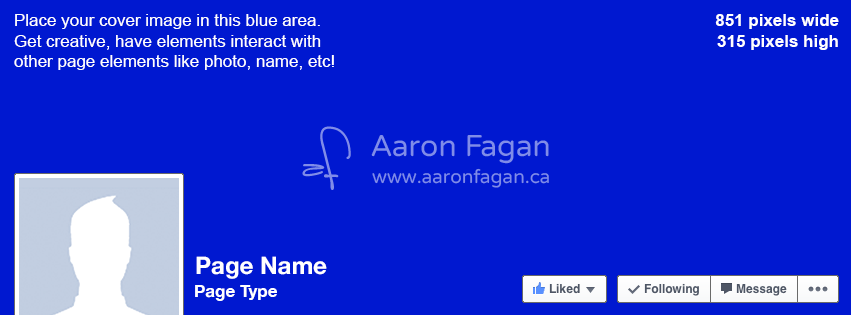
<style>
.page{position:relative;width:851px;height:315px;background:#0018d0}
.page>*{position:absolute;margin:0}
.t1{font:17px "ArialMT";color:#ffffff}
.t2{font:17px "Arial-BoldMT";color:#ffffff}
.t3{font:24px "HelveticaNeue-Bold";color:#ffffff}
.t4{font:17px "HelveticaNeue-Bold";color:#ffffff}
</style>
<div class="page">
<p class="t1" style="left:14px;top:14px;width:320px;height:56px">Place your cover image in this blue area.<br>Get creative, have elements interact with<br>other page elements like photo, name, etc!</p>
<p class="t2" style="left:715px;top:14px;width:124px;height:36px;text-align:right">851 pixels wide<br>315 pixels high</p>
<p class="t3" style="left:196px;top:256px;width:131px;height:23px">Page Name</p>
<p class="t4" style="left:195px;top:285px;width:82px;height:16px">Page Type</p>
</div>
